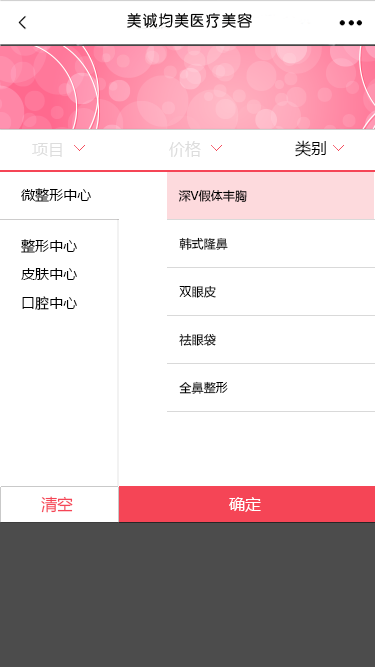
<style>
.page{position:relative;width:375px;height:667px;background:#ffffff}
.page>*{position:absolute;margin:0}
.t1{font:16px "MicrosoftYaHei";letter-spacing:0.005em;color:#dddddd}
.t2{font:16px "MicrosoftYaHei";letter-spacing:0.005em;color:#000000}
.t3{font:14px "MicrosoftYaHei";letter-spacing:0.005em;color:#000000}
.t4{font:12px "MicrosoftYaHei";letter-spacing:0.005em;color:#000000}
.t5{font:16px "MicrosoftYaHei";letter-spacing:0.005em;color:#f54556}
.t6{font:16px "MicrosoftYaHei";letter-spacing:0.005em;color:#ffffff}
</style>
<div class="page">
<p class="t1" style="left:32px;top:143px;width:30px;height:14px">项目</p>
<p class="t1" style="left:169px;top:141px;width:32px;height:16px">价格</p>
<p class="t2" style="left:295px;top:140px;width:31px;height:17px">类别</p>
<p class="t3" style="left:21px;top:188px;width:70px;height:14px">微整形中心</p>
<p class="t4" style="left:178px;top:189px;width:69px;height:13px">深V假体丰胸</p>
<p class="t3" style="left:21px;top:239px;width:56px;height:14px">整形中心</p>
<p class="t4" style="left:179px;top:237px;width:49px;height:13px">韩式隆鼻</p>
<p class="t3" style="left:21px;top:268px;width:56px;height:12px">皮肤中心</p>
<p class="t4" style="left:179px;top:285px;width:37px;height:13px">双眼皮</p>
<p class="t3" style="left:22px;top:296px;width:55px;height:14px">口腔中心</p>
<p class="t4" style="left:179px;top:333px;width:37px;height:13px">祛眼袋</p>
<p class="t4" style="left:179px;top:381px;width:49px;height:13px">全鼻整形</p>
<p class="t5" style="left:41px;top:496px;width:32px;height:17px">清空</p>
<p class="t6" style="left:229px;top:497px;width:32px;height:15px">确定</p>
</div>
